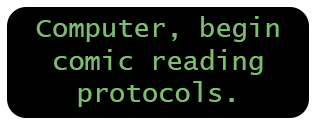
<style>
.page{position:relative;width:315px;height:124px;background:#000000}
.page>*{position:absolute;margin:0}
.t1{font:27.1px "LucidaConsole";color:#7dbe6e}
</style>
<div class="page">
<p class="t1" style="left:36px;top:16px;width:243px;height:91px;text-align:center">Computer, begin<br>comic reading<br>protocols.</p>
</div>
